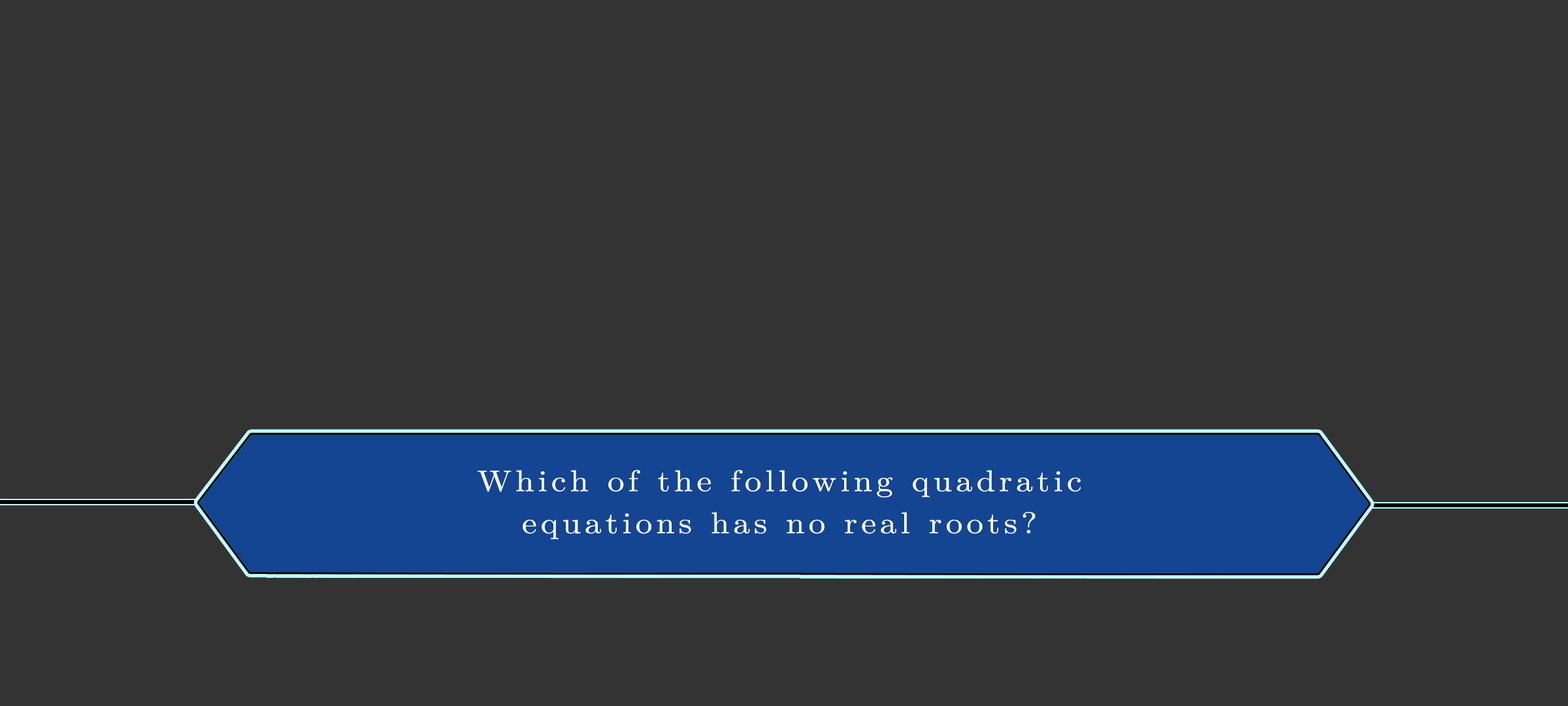
<style>
.page{position:relative;width:1568px;height:706px;background:#333333}
.page>*{position:absolute;margin:0}
.t1{font:30px/42px "LatinModernMath-Regular";letter-spacing:0.115em;color:#ffffff;scale:1.12 1}
</style>
<div class="page">
<p class="t1" style="left:478px;top:469px;width:603px;height:70px;text-align:center">Which of the following quadratic<br>equations has no real roots?</p>
</div>
